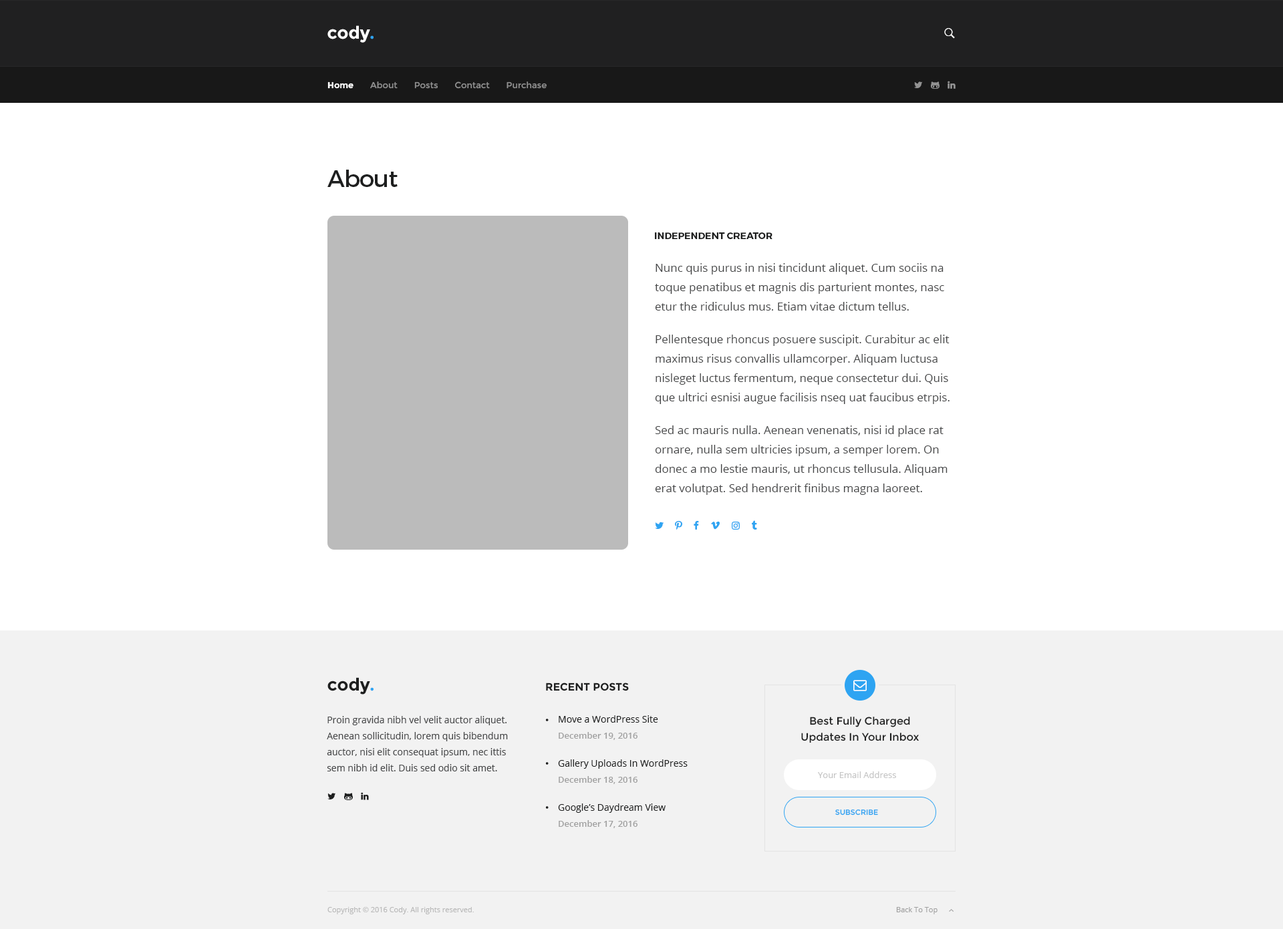
<style>
.page{position:relative;width:1283px;height:929px;background:#ffffff}
.page>*{position:absolute;margin:0}
.t1{font:17.4px "Montserrat-Bold";color:#ffffff}
.t2{font:17.4px "Montserrat-Bold";color:#2fa4f2}
.t3{font:8.7px "Montserrat-Bold";color:#ffffff}
.t4{font:8.7px "Montserrat-Regular";color:#929292}
.t5{font:23.4px "Montserrat-Regular";letter-spacing:-0.02em;color:#1e1f1f}
.t6{font:9.4px "Montserrat-Bold";color:#1e1f1f;text-transform:uppercase}
.t7{font:11.4px/19.4px "OpenSans";color:#454647}
.t8{font:11.4px/13.4px "OpenSans";color:#454647}
.t9{font:17.4px "Montserrat-Bold";color:#1e1f1f}
.t10{font:10.7px "Montserrat-Bold";color:#1e1f1f;text-transform:uppercase}
.t11{font:9.4px/16px "OpenSans";color:#454647}
.t12{font:9.4px/16px "OpenSans";color:#1e1f1f}
.t13{font:8.7px/16px "OpenSans-Semibold";color:#a1a1a1}
.t14{font:10.7px/16px "Montserrat-Regular";color:#1e1f1f}
.t15{font:8.7px "OpenSans";color:#c5c5c5}
.t16{font:7.4px "Montserrat-Regular";color:#2fa4f2;text-transform:uppercase}
.t17{font:7.4px "OpenSans";color:#b9b9b9}
.t18{font:7.4px "OpenSans";color:#a1a1a1}
</style>
<div class="page">
<p class="t1" style="left:327px;top:25px;width:47px;height:18px">cody<span class="t2">.</span></p>
<p class="t3" style="left:327px;top:82px;width:26px;height:7px">Home</p>
<p class="t4" style="left:370px;top:82px;width:177px;height:7px">About       Posts       Contact       Purchase</p>
<p class="t5" style="left:327px;top:170px;width:71px;height:17px">About</p>
<p class="t6" style="left:655px;top:233px;width:117px;height:6px">independent creator</p>
<p class="t7" style="left:655px;top:263px;width:295px;height:232px">Nunc quis purus in nisi tincidunt aliquet. Cum sociis na toque penatibus et magnis dis parturient montes, nasc etur the ridiculus mus. Etiam vitae dictum tellus<span class="t8">. <br><br>P</span>ellentesque rhoncus posuere suscipit. Curabitur ac elit maximus risus convallis ullamcorper. Aliquam luctusa  nisleget luctus fermentum, neque consectetur dui. Quis que ultrici esnisi augue facilisis nseq uat faucibus etrpis<span class="t8">. <br><br>S</span>ed ac mauris nulla. Aenean venenatis, nisi id place rat ornare, nulla sem ultricies ipsum, a semper lorem. On  donec a mo lestie mauris, ut rhoncus tellusula. Aliquam erat volutpat. Sed hendrerit finibus magna laoreet.</p>
<p class="t9" style="left:327px;top:678px;width:47px;height:17px">cody<span class="t2">.</span></p>
<p class="t10" style="left:546px;top:683px;width:83px;height:9px">Recent Posts</p>
<p class="t11" style="left:327px;top:716px;width:181px;height:56px">Proin gravida nibh vel velit auctor aliquet. Aenean sollicitudin, lorem quis bibendum auctor, nisi elit consequat ipsum, nec ittis sem nibh id elit. Duis sed odio sit amet.</p>
<p class="t12" style="left:559px;top:716px;width:99px;height:24px">Move a WordPress Site<br><span class="t13">December 19, 2016</span></p>
<p class="t14" style="left:801px;top:717px;width:118px;height:27px;text-align:center">Best Fully Charged <br>Updates In Your Inbox From Cody</p>
<p class="t12" style="left:558px;top:760px;width:130px;height:24px">Gallery Uploads In WordPress<br><span class="t13">December 18, 2016</span></p>
<p class="t15" style="left:818px;top:772px;width:78px;height:6px">Your Email Address</p>
<p class="t12" style="left:558px;top:804px;width:108px;height:25px">Google’s Daydream View<br><span class="t13">December 17, 2016</span></p>
<p class="t16" style="left:835px;top:810px;width:43px;height:6px">Subscribe</p>
<p class="t17" style="left:327px;top:907px;width:147px;height:8px">Copyright © 2016 Cody. All rights reserved.</p>
<p class="t18" style="left:896px;top:907px;width:41px;height:8px">Back To Top</p>
</div>
